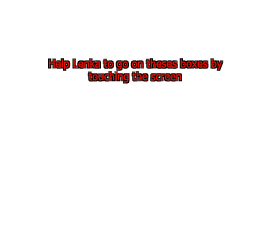
<style>
.page{position:relative;width:256px;height:240px;background:#ffffff}
.page>*{position:absolute;margin:0}
.t1{font:10.7px "Tahoma";color:#e71005}
</style>
<div class="page">
<p class="t1" style="left:49px;top:59px;width:174px;height:24px;text-align:center">Help Lenka to go on theses boxes by touching the screen</p>
</div>
